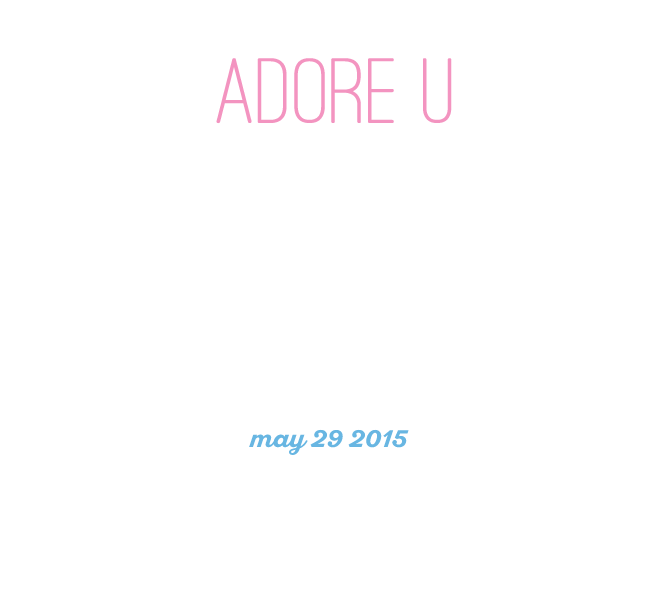
<style>
.page{position:relative;width:651px;height:606px;background:#ffffff}
.page>*{position:absolute;margin:0}
.t1{font:96px "OstrichSansRounded-Medium";color:#f394c0;scale:1.1 1}
.t2{font:24px "SantEliaScript-BoldDMO";color:#68b6e2;scale:1.1 1}
</style>
<div class="page">
<p class="t1" style="left:216px;top:58px;width:236px;height:66px">adore u</p>
<p class="t2" style="left:249px;top:429px;width:160px;height:26px">may 29 2015</p>
</div>
